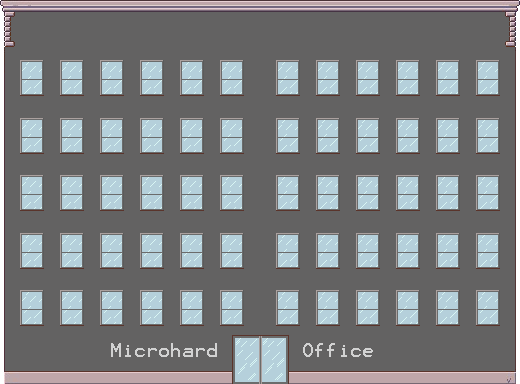
<style>
.page{position:relative;width:520px;height:384px;background:#636262}
.page>*{position:absolute;margin:0}
.t1{font:16px "Terminal";color:#d2d2d2}
</style>
<div class="page">
<p class="t1" style="left:111px;top:343px;width:262px;height:14px">Microhard       Office</p>
</div>
